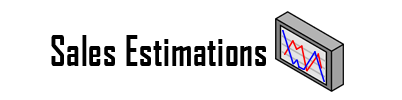
<style>
.page{position:relative;width:402px;height:100px;background:#ffffff}
.page>*{position:absolute;margin:0}
.t1{font:40px "AgencyFB-Bold";letter-spacing:0.025em;color:#000000;scale:0.85 1}
</style>
<div class="page">
<p class="t1" style="left:51px;top:35px;width:215px;height:31px">Sales Estimations</p>
</div>
